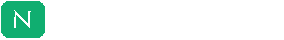
<style>
.page{position:relative;width:284px;height:40px;background:#ffffff}
.page>*{position:absolute;margin:0}
.t1{font:24px "LithosPro-Regular";color:#ffffff}
</style>
<div class="page">
<p class="t1" style="left:14px;top:10px;width:17px;height:18px">N</p>
</div>
